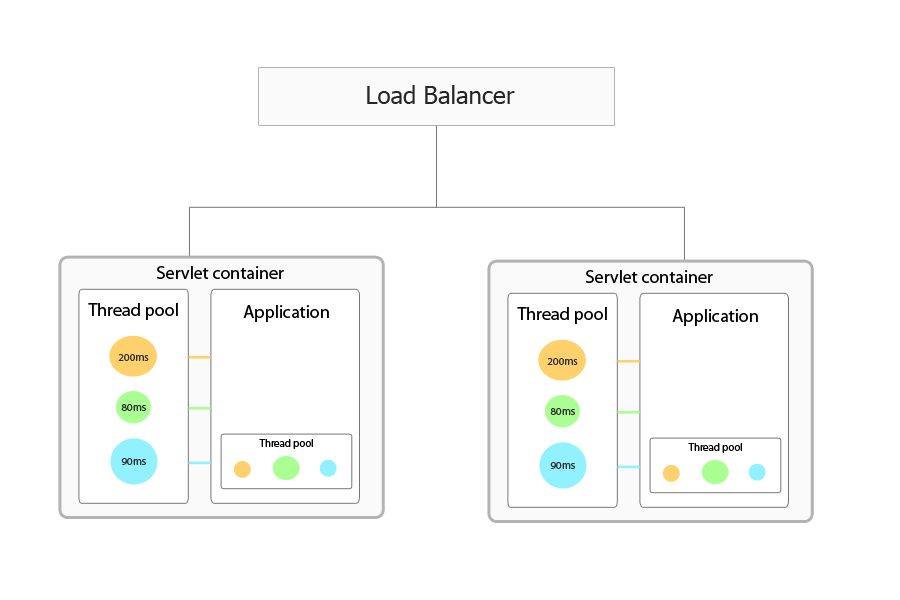
<style>
.page{position:relative;width:900px;height:600px;background:#ffffff}
.page>*{position:absolute;margin:0}
.t1{font:24px "Tahoma";color:#262626}
.t2{font:18px "MyriadPro-Regular";color:#000000}
.t3{font:10.8px "MyriadPro-Regular";color:#313131}
.t4{font:10.8px "MyriadPro-Regular";color:#000000}
</style>
<div class="page">
<p class="t1" style="left:367px;top:85px;width:148px;height:19px">Load Balancer</p>
<p class="t2" style="left:157px;top:266px;width:127px;height:13px">Servlet container</p>
<p class="t2" style="left:586px;top:270px;width:127px;height:13px">Servlet container</p>
<p class="t2" style="left:88px;top:303px;width:90px;height:17px">Thread pool</p>
<p class="t2" style="left:243px;top:305px;width:86px;height:17px">Application</p>
<p class="t2" style="left:517px;top:307px;width:90px;height:17px">Thread pool</p>
<p class="t2" style="left:672px;top:309px;width:86px;height:17px">Application</p>
<p class="t3" style="left:118px;top:354px;width:31px;height:7px">200ms</p>
<p class="t3" style="left:547px;top:358px;width:31px;height:7px">200ms</p>
<p class="t3" style="left:121px;top:404px;width:25px;height:7px">80ms</p>
<p class="t3" style="left:550px;top:408px;width:25px;height:7px">80ms</p>
<p class="t4" style="left:259px;top:439px;width:54px;height:10px">Thread pool</p>
<p class="t4" style="left:688px;top:443px;width:54px;height:10px">Thread pool</p>
<p class="t3" style="left:121px;top:458px;width:25px;height:7px">90ms</p>
<p class="t3" style="left:550px;top:462px;width:25px;height:7px">90ms</p>
</div>
